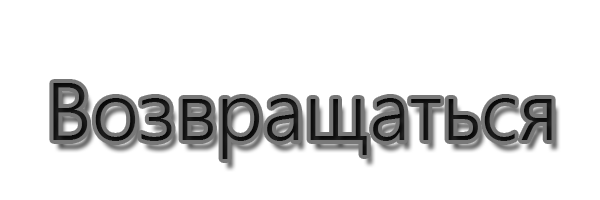
<style>
.page{position:relative;width:600px;height:200px;background:#ffffff}
.page>*{position:absolute;margin:0}
.t1{font:80px "MalgunGothic-Semilight";color:#111111}
</style>
<div class="page">
<p class="t1" style="left:53px;top:83px;width:499px;height:76px">Возвращаться</p>
</div>
